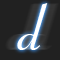
<style>
.page{position:relative;width:60px;height:60px;background:#212121}
.page>*{position:absolute;margin:0}
.t1{font:72px "Ribbon131BT-Bold";color:#ffffff}
</style>
<div class="page">
<p class="t1" style="left:17px;top:3px;width:31px;height:47px">d</p>
</div>
